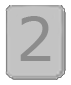
<style>
.page{position:relative;width:71px;height:85px;background:#c3c3c3}
.page>*{position:absolute;margin:0}
.t1{font:60px "Verdana";color:#8c8c8c}
</style>
<div class="page">
<p class="t1" style="left:20px;top:16px;width:31px;height:45px">2</p>
</div>
